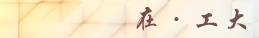
<style>
.page{position:relative;width:259px;height:38px}
.page>*{position:absolute;margin:0}
.t1{font:46.8px "STXingkai";letter-spacing:0.1em;color:#754f4c;font-variant:small-caps}
</style>
<div class="page">
<p class="t1" style="left:136px;top:7px;width:111px;height:24px">在·工大</p>
</div>
